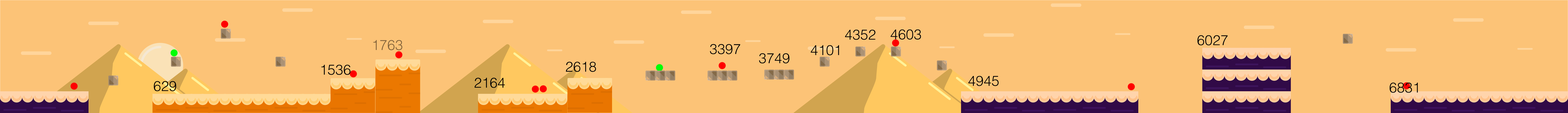
<style>
.page{position:relative;width:1568px;height:113px;background:#fcc377}
.page>*{position:absolute;margin:0}
.t1{font:14.1px "Helvetica-Light";color:#000000}
.t2{font:14.1px "Helvetica-Light";color:#84643b}
</style>
<div class="page">
<p class="t1" style="left:845px;top:30px;width:30px;height:10px">4352</p>
<p class="t1" style="left:891px;top:29px;width:30px;height:11px">4603</p>
<p class="t2" style="left:373px;top:40px;width:29px;height:10px">1763</p>
<p class="t1" style="left:1197px;top:35px;width:31px;height:11px">6027</p>
<p class="t1" style="left:710px;top:44px;width:30px;height:10px">3397</p>
<p class="t1" style="left:759px;top:53px;width:30px;height:11px">3749</p>
<p class="t1" style="left:811px;top:45px;width:28px;height:11px">4101</p>
<p class="t1" style="left:321px;top:65px;width:30px;height:10px">1536</p>
<p class="t1" style="left:566px;top:62px;width:30px;height:10px">2618</p>
<p class="t1" style="left:474px;top:78px;width:31px;height:10px">2164</p>
<p class="t1" style="left:968px;top:76px;width:31px;height:10px">4945</p>
<p class="t1" style="left:154px;top:81px;width:22px;height:10px">629</p>
<p class="t1" style="left:1390px;top:83px;width:28px;height:10px">6831</p>
</div>
